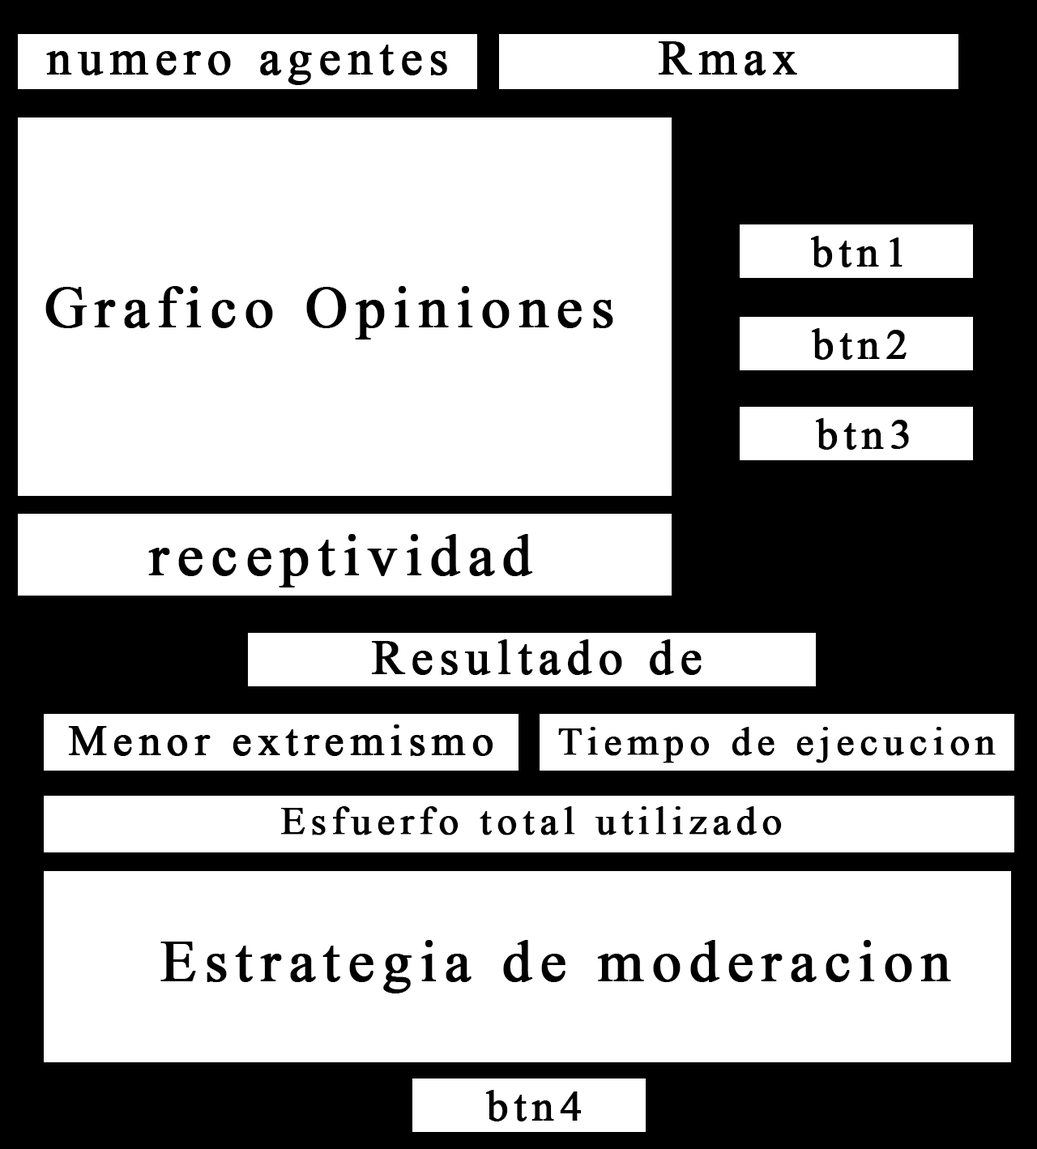
<style>
.page{position:relative;width:1037px;height:1149px;background:#ffffff}
.page>*{position:absolute;margin:0}
.t1{font:49px "TimesNewRomanPSMT";letter-spacing:0.12em;color:#000000;font-weight:bold}
.t2{font:42.9px "TimesNewRomanPSMT";letter-spacing:0.12em;color:#000000;font-weight:bold}
.t3{font:58.4px "TimesNewRomanPSMT";letter-spacing:0.12em;color:#000000;font-weight:bold}
.t4{font:48.5px "TimesNewRomanPSMT";letter-spacing:0.12em;color:#000000;font-weight:bold}
.t5{font:43.2px "TimesNewRomanPSMT";letter-spacing:0.12em;color:#000000;font-weight:bold}
.t6{font:39.8px "TimesNewRomanPSMT";letter-spacing:0.12em;color:#000000;font-weight:bold}
</style>
<div class="page">
<p class="t1" style="left:659px;top:41px;width:139px;height:34px">Rmax</p>
<p class="t1" style="left:46px;top:45px;width:401px;height:40px">numero agentes</p>
<p class="t2" style="left:811px;top:236px;width:92px;height:31px">btn1</p>
<p class="t3" style="left:45px;top:286px;width:569px;height:54px">Grafico Opiniones</p>
<p class="t2" style="left:812px;top:328px;width:95px;height:32px">btn2</p>
<p class="t2" style="left:816px;top:418px;width:93px;height:32px">btn3</p>
<p class="t3" style="left:148px;top:534px;width:385px;height:54px">receptividad</p>
<p class="t4" style="left:372px;top:640px;width:330px;height:35px">Resultado de</p>
<p class="t5" style="left:68px;top:725px;width:426px;height:31px">Menor extremismo</p>
<p class="t6" style="left:558px;top:727px;width:438px;height:37px">Tiempo de ejecucion</p>
<p class="t6" style="left:281px;top:806px;width:501px;height:30px">Esfuerfo total utilizado</p>
<p class="t3" style="left:160px;top:940px;width:792px;height:54px">Estrategia de moderacion</p>
<p class="t2" style="left:486px;top:1090px;width:96px;height:32px">btn4</p>
</div>
